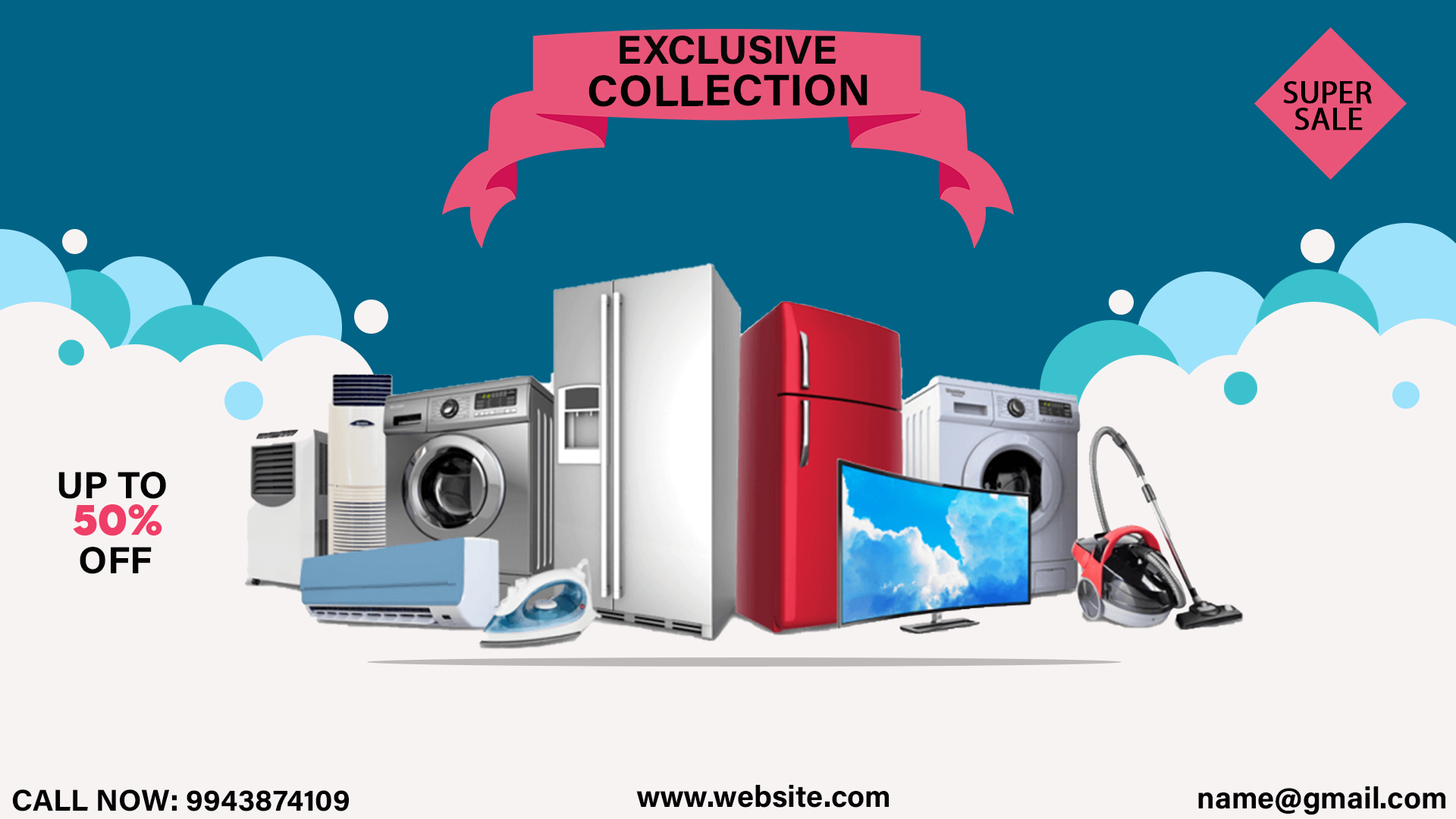
<style>
.page{position:relative;width:1456px;height:819px;background:#f8f3f3}
.page>*{position:absolute;margin:0}
.t1{font:40.3px "AcuminConcept-Bold";color:#070707;font-weight:bold}
.t2{font:44.2px "AcuminConcept-Bold";color:#030303;font-weight:bold}
.t3{font:31.6px "MyriadPro-Regular";color:#000000;font-weight:bold}
.t4{font:37.9px "AcuminConcept-Bold";color:#030303;font-weight:bold}
.t5{font:37.9px "LEMONMILK-Bold";color:#ef3e67;font-weight:bold}
.t6{font:30.1px "AcuminConcept-Bold";color:#030303;font-weight:bold}
</style>
<div class="page">
<p class="t1" style="left:620px;top:35px;width:216px;height:29px">EXCLUSIVE</p>
<p class="t2" style="left:588px;top:74px;width:280px;height:33px">COLLECTION</p>
<p class="t3" style="left:1283px;top:81px;width:89px;height:23px">SUPER</p>
<p class="t3" style="left:1294px;top:108px;width:69px;height:22px">SALE</p>
<p class="t4" style="left:58px;top:472px;width:108px;height:27px">UP TO</p>
<p class="t5" style="left:73px;top:504px;width:89px;height:32px">50%</p>
<p class="t4" style="left:80px;top:547px;width:72px;height:27px">OFF</p>
<p class="t6" style="left:636px;top:784px;width:254px;height:24px">www.website.com</p>
<p class="t6" style="left:1198px;top:786px;width:248px;height:29px">name@gmail.com</p>
<p class="t6" style="left:12px;top:789px;width:338px;height:22px">CALL NOW: 9943874109</p>
</div>
